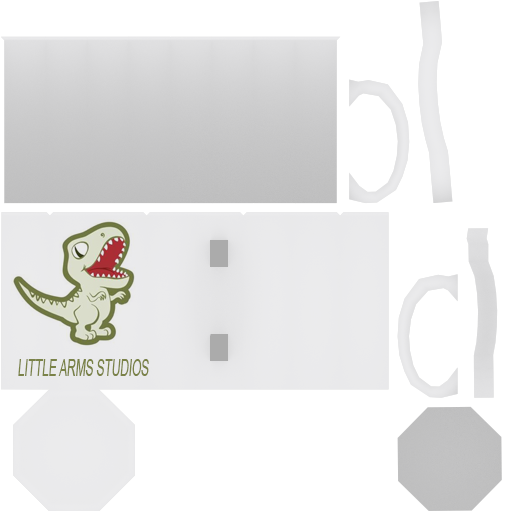
<style>
.page{position:relative;width:512px;height:512px;background:#ffffff}
.page>*{position:absolute;margin:0}
.t1{font:24px "ArialMT";color:#7a8248;font-style:italic;scale:0.49 1}
</style>
<div class="page">
<p class="t1" style="left:18px;top:359px;width:131px;height:17px">LITTLE ARMS STUDIOS</p>
</div>
